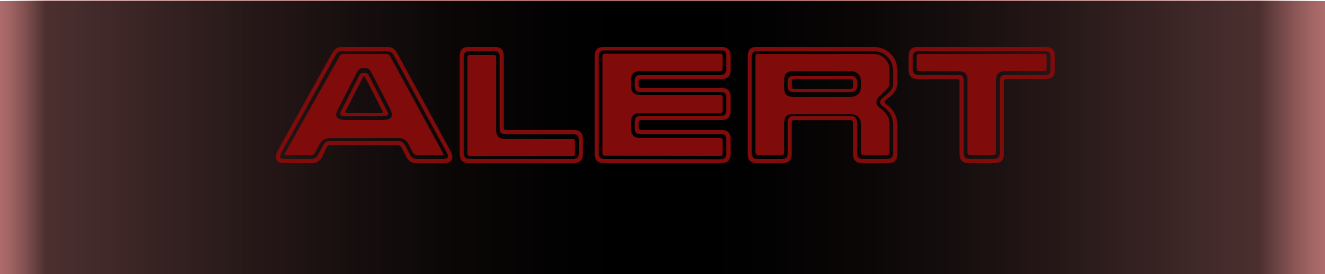
<style>
.page{position:relative;width:1325px;height:274px}
.page>*{position:absolute;margin:0}
.t1{font:165.8px "FederationStarFleet";color:#7f0b0b}
</style>
<div class="page">
<p class="t1" style="left:276px;top:47px;width:779px;height:116px">ALERT</p>
</div>
